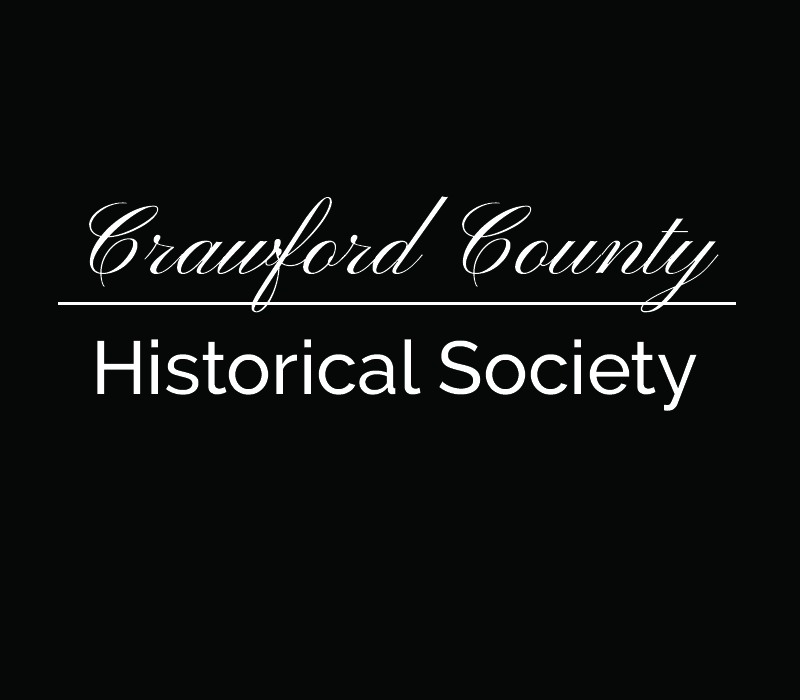
<style>
.page{position:relative;width:800px;height:700px;background:#060808}
.page>*{position:absolute;margin:0}
.t1{font:100px "PinyonScript";color:#ffffff}
.t2{font:75px "Raleway-Medium";color:#ffffff}
</style>
<div class="page">
<p class="t1" style="left:89px;top:196px;width:630px;height:117px">Crawford County</p>
<p class="t2" style="left:97px;top:339px;width:600px;height:72px">Historical Society</p>
</div>
